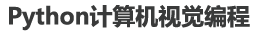
<style>
.page{position:relative;width:259px;height:33px;background:#ffffff}
.page>*{position:absolute;margin:0}
.t1{font:22.9px "MicrosoftYaHei-Bold";color:#393a3a}
</style>
<div class="page">
<p class="t1" style="left:9px;top:5px;width:241px;height:26px">Python计算机视觉编程</p>
</div>
